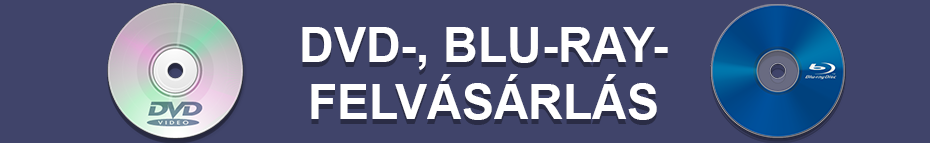
<style>
.page{position:relative;width:930px;height:143px;background:#40446a}
.page>*{position:absolute;margin:0}
.t1{font:48px "Arial-BoldMT";color:#ffffff}
</style>
<div class="page">
<p class="t1" style="left:302px;top:27px;width:366px;height:93px;text-align:center">DVD-, BLU-RAY-<br>FELVÁSÁRLÁS</p>
</div>
